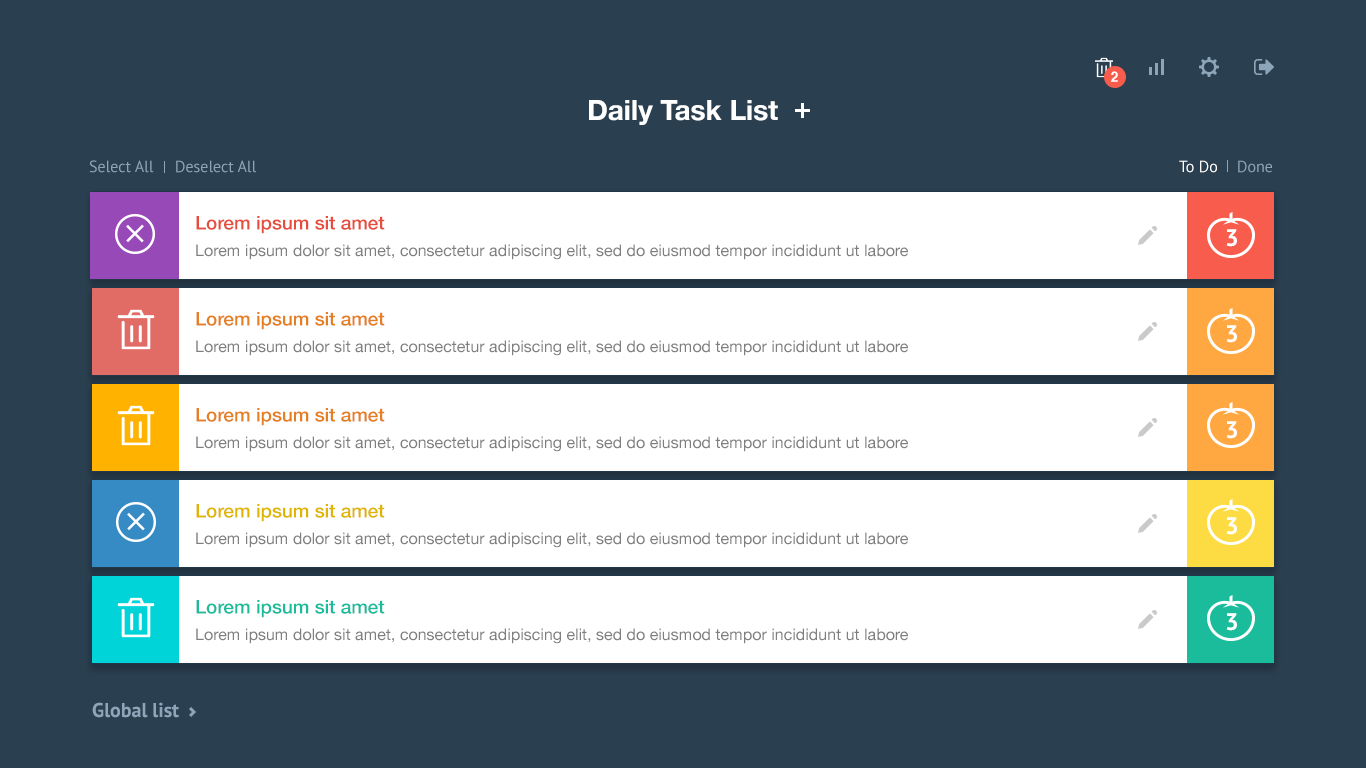
<style>
.page{position:relative;width:1366px;height:768px;background:#2a3f50}
.page>*{position:absolute;margin:0}
.t1{font:14px "Helvetica-Bold";color:#ffffff}
.t2{font:28px "HelveticaNeue-Bold";color:#ffffff}
.t3{font:16px "PTSans-Regular";color:#8da5b8}
.t4{font:16px "PTSans-Regular";color:#8ea5b8}
.t5{font:16px "PTSans-Regular";color:#ffffff}
.t6{font:19px "HelveticaNeue-Medium";color:#e74c3c}
.t7{font:24px "PTSans-Bold";color:#ffffff}
.t8{font:16px "HelveticaNeue";color:#7f7f7f}
.t9{font:19px "HelveticaNeue-Medium";color:#e67e22}
.t10{font:19px "HelveticaNeue-Medium";color:#dfb500}
.t11{font:19px "HelveticaNeue-Medium";color:#1abc9c}
.t12{font:20px "PTSans-Bold";color:#8da5b8}
</style>
<div class="page">
<p class="t1" style="left:1111px;top:71px;width:7px;height:11px">2</p>
<p class="t2" style="left:589px;top:100px;width:189px;height:25px">Daily Task List</p>
<p class="t3" style="left:89px;top:160px;width:65px;height:13px">Select All</p>
<p class="t4" style="left:176px;top:160px;width:80px;height:13px">Deselect All</p>
<p class="t5" style="left:1179px;top:160px;width:38px;height:13px">To Do</p>
<p class="t4" style="left:1238px;top:160px;width:34px;height:13px">Done</p>
<p class="t6" style="left:196px;top:216px;width:189px;height:18px">Lorem ipsum sit amet</p>
<p class="t7" style="left:1226px;top:229px;width:11px;height:18px">3</p>
<p class="t8" style="left:196px;top:244px;width:712px;height:16px">Lorem ipsum dolor sit amet, consectetur adipiscing elit, sed do eiusmod tempor incididunt ut labore</p>
<p class="t9" style="left:196px;top:312px;width:189px;height:18px">Lorem ipsum sit amet</p>
<p class="t7" style="left:1226px;top:325px;width:11px;height:18px">3</p>
<p class="t8" style="left:196px;top:340px;width:712px;height:16px">Lorem ipsum dolor sit amet, consectetur adipiscing elit, sed do eiusmod tempor incididunt ut labore</p>
<p class="t9" style="left:196px;top:408px;width:189px;height:18px">Lorem ipsum sit amet</p>
<p class="t7" style="left:1226px;top:421px;width:11px;height:18px">3</p>
<p class="t8" style="left:196px;top:436px;width:712px;height:16px">Lorem ipsum dolor sit amet, consectetur adipiscing elit, sed do eiusmod tempor incididunt ut labore</p>
<p class="t10" style="left:196px;top:504px;width:189px;height:18px">Lorem ipsum sit amet</p>
<p class="t7" style="left:1226px;top:517px;width:11px;height:18px">3</p>
<p class="t8" style="left:196px;top:532px;width:712px;height:16px">Lorem ipsum dolor sit amet, consectetur adipiscing elit, sed do eiusmod tempor incididunt ut labore</p>
<p class="t11" style="left:196px;top:600px;width:189px;height:18px">Lorem ipsum sit amet</p>
<p class="t7" style="left:1226px;top:613px;width:11px;height:18px">3</p>
<p class="t8" style="left:196px;top:628px;width:712px;height:16px">Lorem ipsum dolor sit amet, consectetur adipiscing elit, sed do eiusmod tempor incididunt ut labore</p>
<p class="t12" style="left:92px;top:702px;width:87px;height:16px">Global list</p>
</div>
